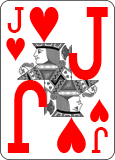
<style>
.page{position:relative;width:115px;height:160px;background:#ffffff}
.page>*{position:absolute;margin:0}
.t1{font:31.1px "CardCharacters";color:#ff0000;scale:0.95 1}
.t2{font:86.4px "CardCharacters";color:#ff0000;scale:0.83 1}
</style>
<div class="page">
<p class="t1" style="left:7px;top:7px;width:17px;height:26px">J</p>
<p class="t2" style="left:68px;top:7px;width:40px;height:73px">J</p>
<p class="t2" style="left:7px;top:80px;width:40px;height:73px;rotate:180deg">J</p>
<p class="t1" style="left:91px;top:127px;width:17px;height:26px;rotate:180deg">J</p>
</div>
